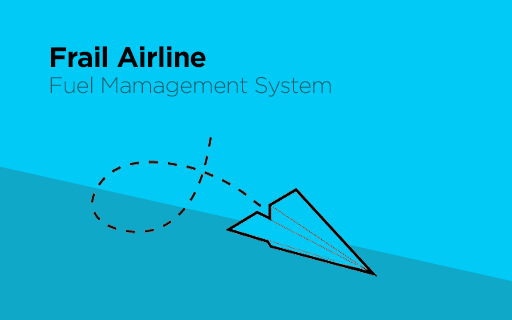
<style>
.page{position:relative;width:512px;height:320px;background:#00caf5}
.page>*{position:absolute;margin:0}
.t1{font:28.3px "Gotham-Bold";letter-spacing:-0.025em;color:#010101}
.t2{font:22.7px "Gotham-Light";letter-spacing:-0.025em;color:#1b5764}
</style>
<div class="page">
<p class="t1" style="left:51px;top:46px;width:155px;height:22px">Frail Airline</p>
<p class="t2" style="left:50px;top:76px;width:281px;height:21px">Fuel Mamagement System</p>
</div>
